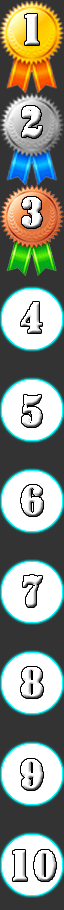
<style>
.page{position:relative;width:64px;height:910px;background:#333333}
.page>*{position:absolute;margin:0}
.t1{font:44.7px "ArmyThin";letter-spacing:0.05em;color:#ffffff;font-weight:bold}
</style>
<div class="page">
<p class="t1" style="left:25px;top:14px;width:14px;height:31px">1</p>
<p class="t1" style="left:22px;top:106px;width:20px;height:32px">2</p>
<p class="t1" style="left:22px;top:197px;width:20px;height:31px">3</p>
<p class="t1" style="left:22px;top:395px;width:20px;height:32px">5</p>
<p class="t1" style="left:21px;top:485px;width:22px;height:31px">6</p>
<p class="t1" style="left:21px;top:667px;width:22px;height:31px">8</p>
<p class="t1" style="left:21px;top:759px;width:22px;height:31px">9</p>
</div>
